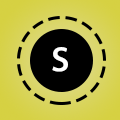
<style>
.page{position:relative;width:120px;height:120px;background:#000000}
.page>*{position:absolute;margin:0}
.t1{font:48px "MyriadPro-Regular";color:#ffffff}
</style>
<div class="page">
<p class="t1" style="left:52px;top:47px;width:16px;height:25px">s</p>
</div>
